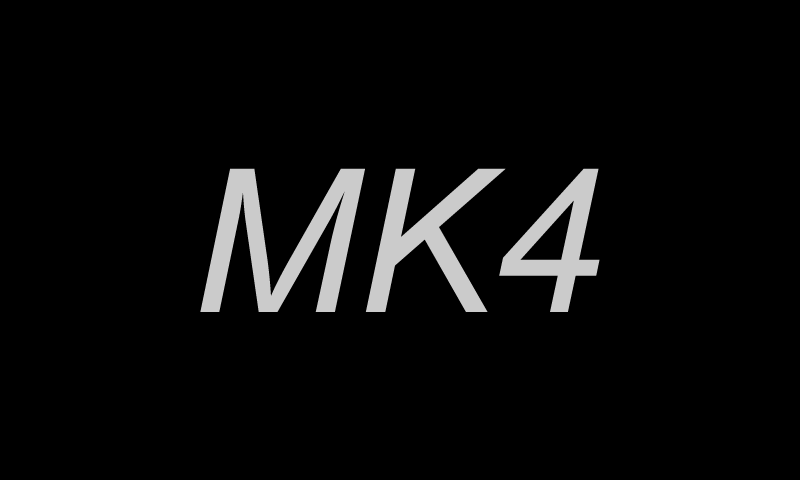
<style>
.page{position:relative;width:800px;height:480px;background:#000000}
.page>*{position:absolute;margin:0}
.t1{font:200px "Arial-ItalicMT";color:#cccccc}
</style>
<div class="page">
<p class="t1" style="left:200px;top:168px;width:400px;height:144px">MK4</p>
</div>
